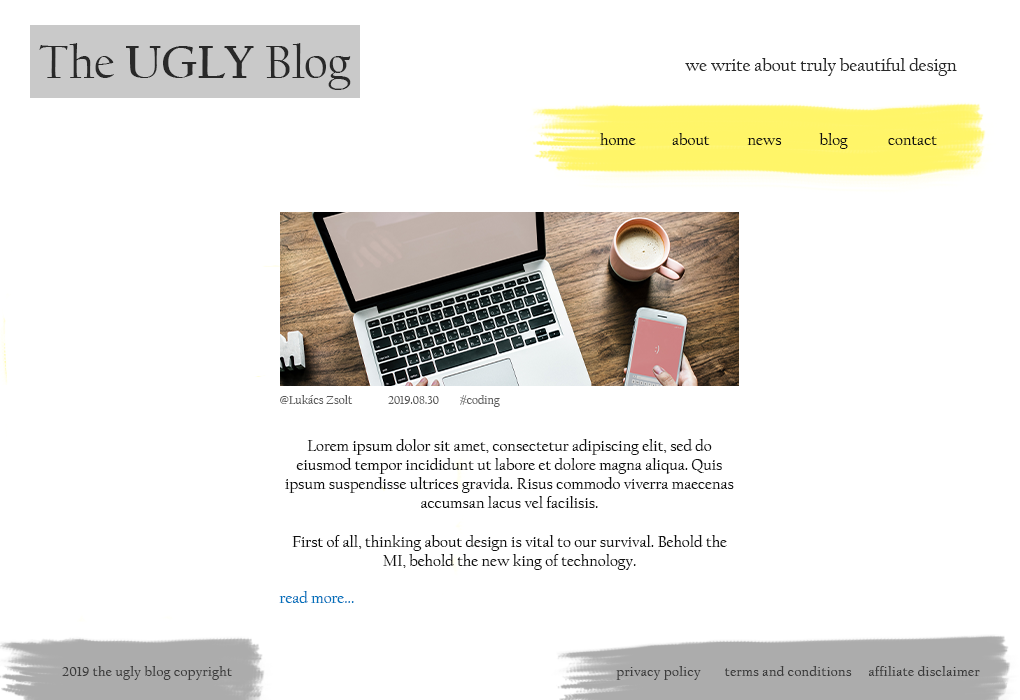
<style>
.page{position:relative;width:1020px;height:700px;background:#ffffff}
.page>*{position:absolute;margin:0}
.t1{font:48px "CalifornianFB-Bold";color:#292929}
.t2{font:48px "CalifornianFB-Reg";color:#292929}
.t3{font:18px "CalifornianFB-Reg";color:#292929}
.t4{font:16px "CalifornianFB-Reg";color:#111111}
.t5{font:12px "CalifornianFB-Reg";color:#5a5a5a}
.t6{font:16px "CalifornianFB-Reg";color:#0072bc}
.t7{font:14px "CalifornianFB-Reg";letter-spacing:0.025em;color:#3c3c3c}
</style>
<div class="page">
<p class="t1" style="left:39px;top:43px;width:312px;height:47px"><span class="t2">The </span>UGLY<span class="t2"> Blog</span></p>
<p class="t3" style="left:685px;top:58px;width:272px;height:18px">we write about truly beautiful design</p>
<p class="t4" style="left:600px;top:133px;width:337px;height:16px">home  about  news  blog  contact</p>
<p class="t5" style="left:280px;top:395px;width:220px;height:12px">@Lukács Zsolt 2019.08.30 #coding</p>
<p class="t4" style="left:285px;top:439px;width:449px;height:131px;text-align:center">Lorem ipsum dolor sit amet, consectetur adipiscing elit, sed do eiusmod tempor incididunt ut labore et dolore magna aliqua. Quis ipsum suspendisse ultrices gravida. Risus commodo viverra maecenas accumsan lacus vel facilisis. <br><br>First of all, thinking about design is vital to our survival. Behold the MI, behold the new king of technology.</p>
<p class="t6" style="left:279px;top:591px;width:75px;height:12px">read more...</p>
<p class="t7" style="left:62px;top:666px;width:170px;height:14px">2019 the ugly blog copyright</p>
<p class="t7" style="left:616px;top:666px;width:364px;height:14px">privacy policy terms and conditions affiliate disclaimer</p>
</div>
